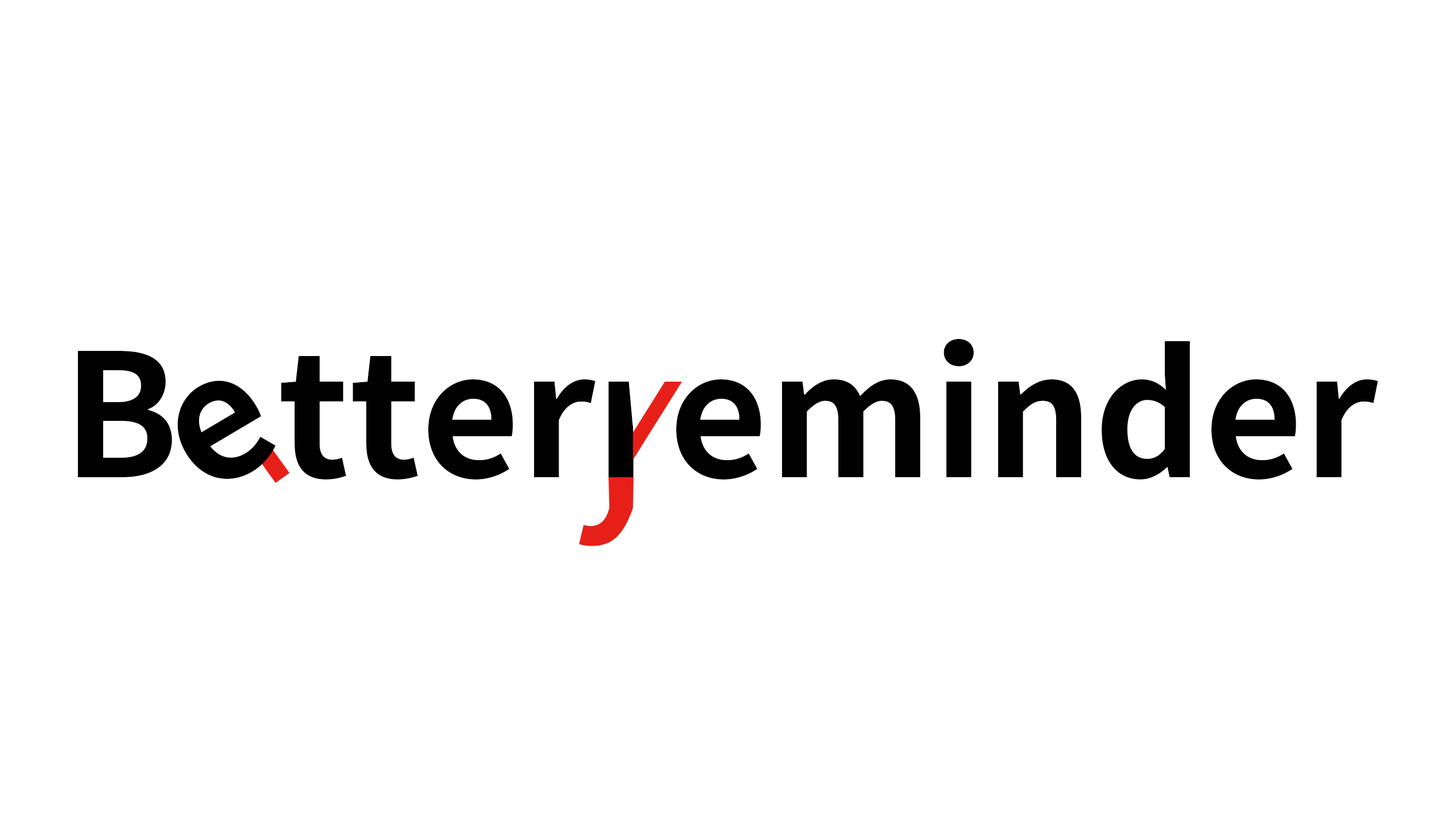
<style>
.page{position:relative;width:1456px;height:819px;background:#ffffff}
.page>*{position:absolute;margin:0}
.t1{font:170.6px "NotoSansHant-Bold";color:#010101}
.t2{font:170.6px "NotoSansHant-Bold";color:#000000}
.t3{font:170.6px "NotoSansHant-Bold"}
</style>
<div class="page">
<p class="t1" style="left:78px;top:339px;width:1300px;height:141px">Betterreminder</p>
<p class="t2" style="left:177px;top:380px;width:99px;height:99px;rotate:-31deg">e</p>
<p class="t3" style="left:573px;top:412px;width:93px;height:134px">y</p>
</div>
